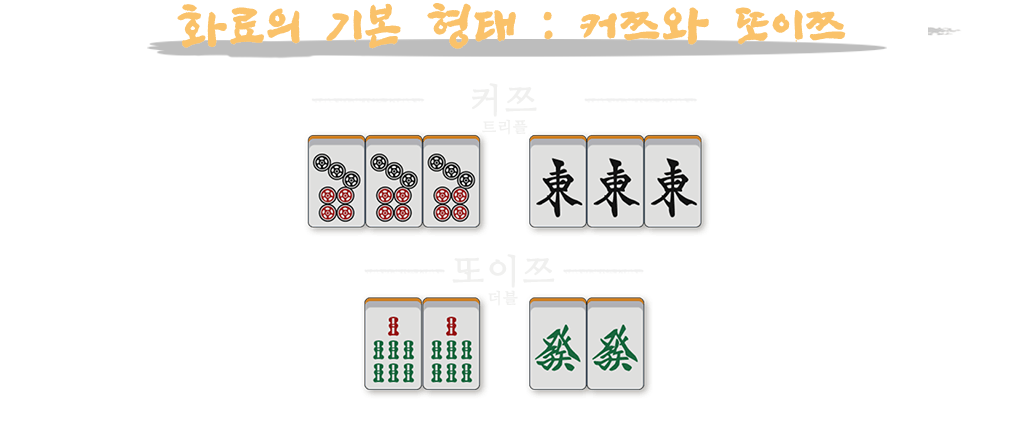
<style>
.page{position:relative;width:1024px;height:435px;background:#ffffff}
.page>*{position:absolute;margin:0}
.t1{font:48px "SangSangRockOTF";letter-spacing:0.06em;color:#fac26a;font-weight:bold}
.t2{font:34px "NanumMyeongjo";letter-spacing:0.06em;color:#f0f0ef;font-weight:bold}
.t3{font:15px "NanumMyeongjo";letter-spacing:0.06em;color:#f0f0ef;font-weight:bold}
</style>
<div class="page">
<p class="t1" style="left:177px;top:3px;width:669px;height:46px">화료의 기본 형태 : 커쯔와 또이쯔</p>
<p class="t2" style="left:472px;top:83px;width:65px;height:34px">커쯔</p>
<p class="t3" style="left:482px;top:119px;width:46px;height:16px">트리플</p>
<p class="t2" style="left:452px;top:254px;width:103px;height:34px">또이쯔</p>
<p class="t3" style="left:488px;top:290px;width:30px;height:16px">더블</p>
</div>
